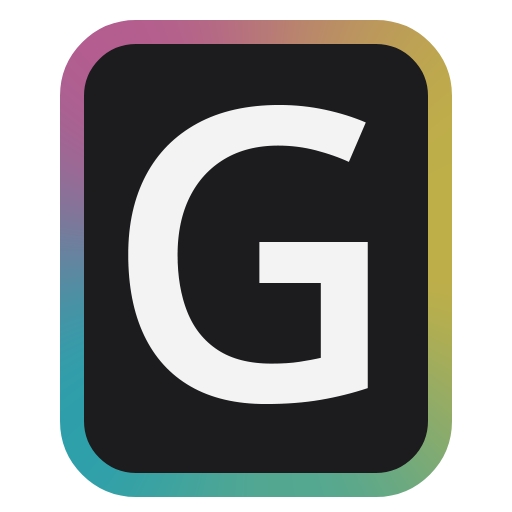
<style>
.page{position:relative;width:512px;height:512px;background:#1c1c1f}
.page>*{position:absolute;margin:0}
.t1{font:406.7px "OpenSansRoman-SemiBold";letter-spacing:0.15em;color:#f3f3f4}
</style>
<div class="page">
<p class="t1" style="left:128px;top:105px;width:240px;height:299px">G</p>
</div>
